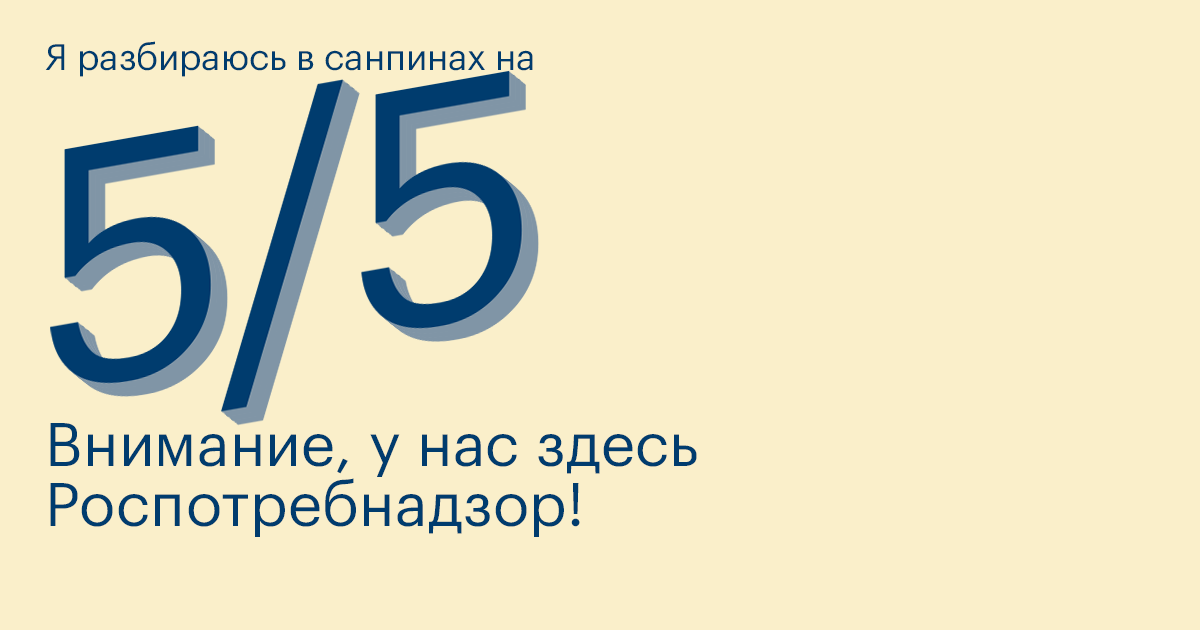
<style>
.page{position:relative;width:1200px;height:630px;background:#faefca}
.page>*{position:absolute;margin:0}
.t1{font:36px "GraphikLC-Regular";letter-spacing:-0.005em;color:#003c6e}
.t2{font:60px/60px "GraphikLC-Regular";letter-spacing:0.005em;color:#003c6e}
</style>
<div class="page">
<p class="t1" style="left:45px;top:41px;width:488px;height:36px">Я разбираюсь в санпинах на</p>
<p class="t2" style="left:50px;top:423px;width:647px;height:114px">Внимание, у нас здесь Роспотребнадзор!</p>
</div>
